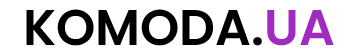
<style>
.page{position:relative;width:360px;height:54px;background:#ffffff}
.page>*{position:absolute;margin:0}
.t1{font:50px "Poppins-SemiBold";color:#000000}
.t2{font:50px "Poppins-SemiBold";color:#a02bc0}
</style>
<div class="page">
<p class="t1" style="left:26px;top:9px;width:308px;height:37px">KOMODA.<span class="t2">UA</span></p>
</div>
